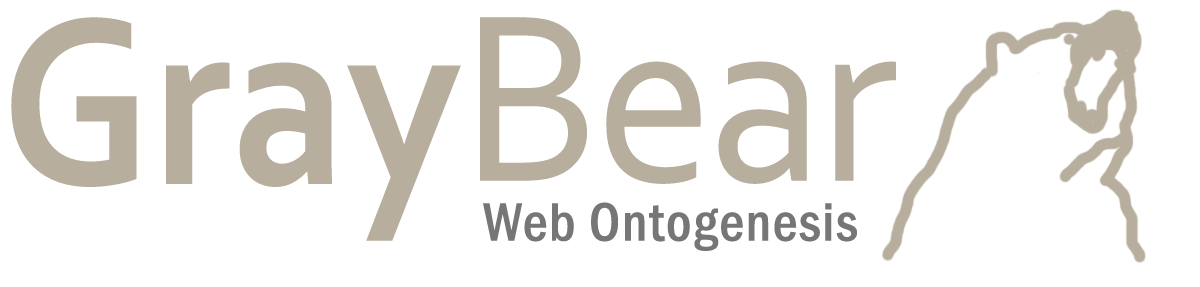
<style>
.page{position:relative;width:1200px;height:287px;background:#ffffff}
.page>*{position:absolute;margin:0}
.t1{font:250px "Corbel-Bold";color:#b7ae9d;scale:0.9 1}
.t2{font:250px "Corbel";letter-spacing:-0.025em;color:#b7ae9d;scale:0.95 1}
.t3{font:56px "FranklinGothic-MediumCond";letter-spacing:0.025em;color:#767676}
</style>
<div class="page">
<p class="t1" style="left:11px;top:17px;width:450px;height:224px">Gray</p>
<p class="t2" style="left:480px;top:17px;width:416px;height:167px">Bear</p>
<p class="t3" style="left:483px;top:202px;width:374px;height:49px">Web Ontogenesis</p>
</div>
